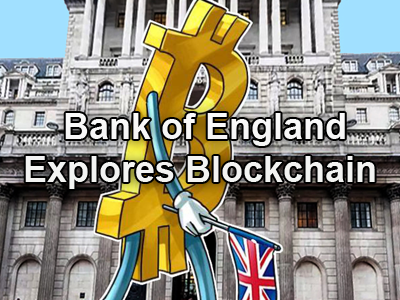
<style>
.page{position:relative;width:400px;height:300px}
.page>*{position:absolute;margin:0}
.t1{font:36px "Arial-BoldMT";color:#f3f3f2}
</style>
<div class="page">
<p class="t1" style="left:25px;top:113px;width:350px;height:76px;text-align:center">Bank of England<br>Explores Blockchain</p>
</div>
